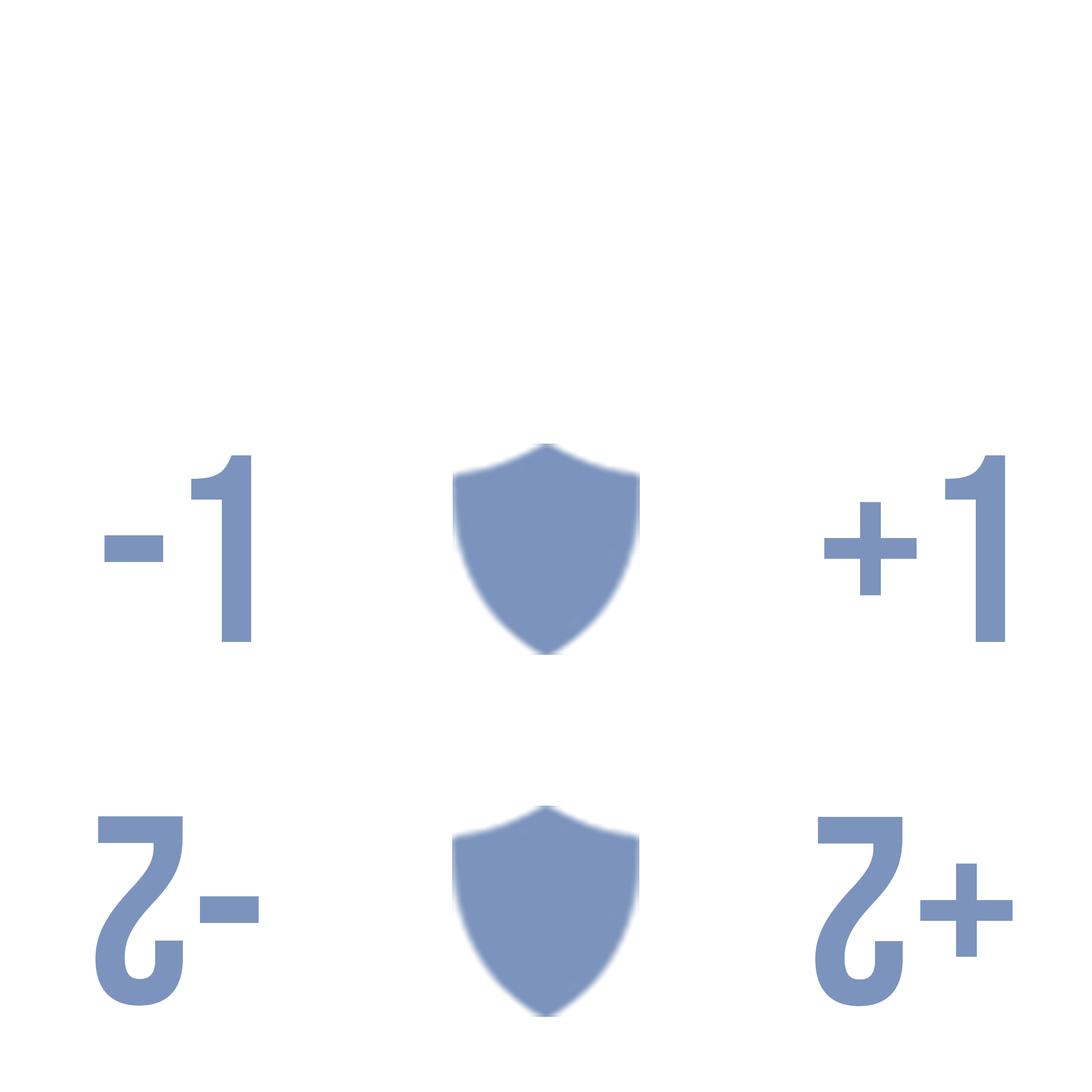
<style>
.page{position:relative;width:1092px;height:1092px;background:#ffffff}
.page>*{position:absolute;margin:0}
.t1{font:266.6px "BebasNeue-Regular";color:#7c94bd}
</style>
<div class="page">
<p class="t1" style="left:105px;top:455px;width:146px;height:187px">-1</p>
<p class="t1" style="left:824px;top:455px;width:181px;height:187px">+1</p>
<p class="t1" style="left:95px;top:816px;width:164px;height:190px;rotate:180deg">-2</p>
<p class="t1" style="left:815px;top:817px;width:198px;height:189px;rotate:180deg">+2</p>
</div>
